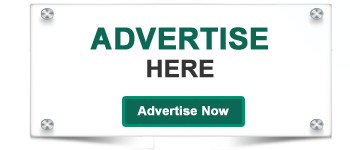
<style>
.page{position:relative;width:350px;height:150px;background:#ffffff}
.page>*{position:absolute;margin:0}
.t1{font:30px "Arial-BoldMT";color:#0b6854;font-weight:bold}
.t2{font:24px "Arial-BoldMT";color:#343434;font-weight:bold}
.t3{font:12.5px "Arial-BoldMT";color:#ffffff;font-weight:bold}
</style>
<div class="page">
<p class="t1" style="left:90px;top:27px;width:178px;height:23px">ADVERTISE</p>
<p class="t2" style="left:147px;top:59px;width:67px;height:19px">HERE</p>
<p class="t3" style="left:137px;top:106px;width:92px;height:10px">Advertise Now</p>
</div>
